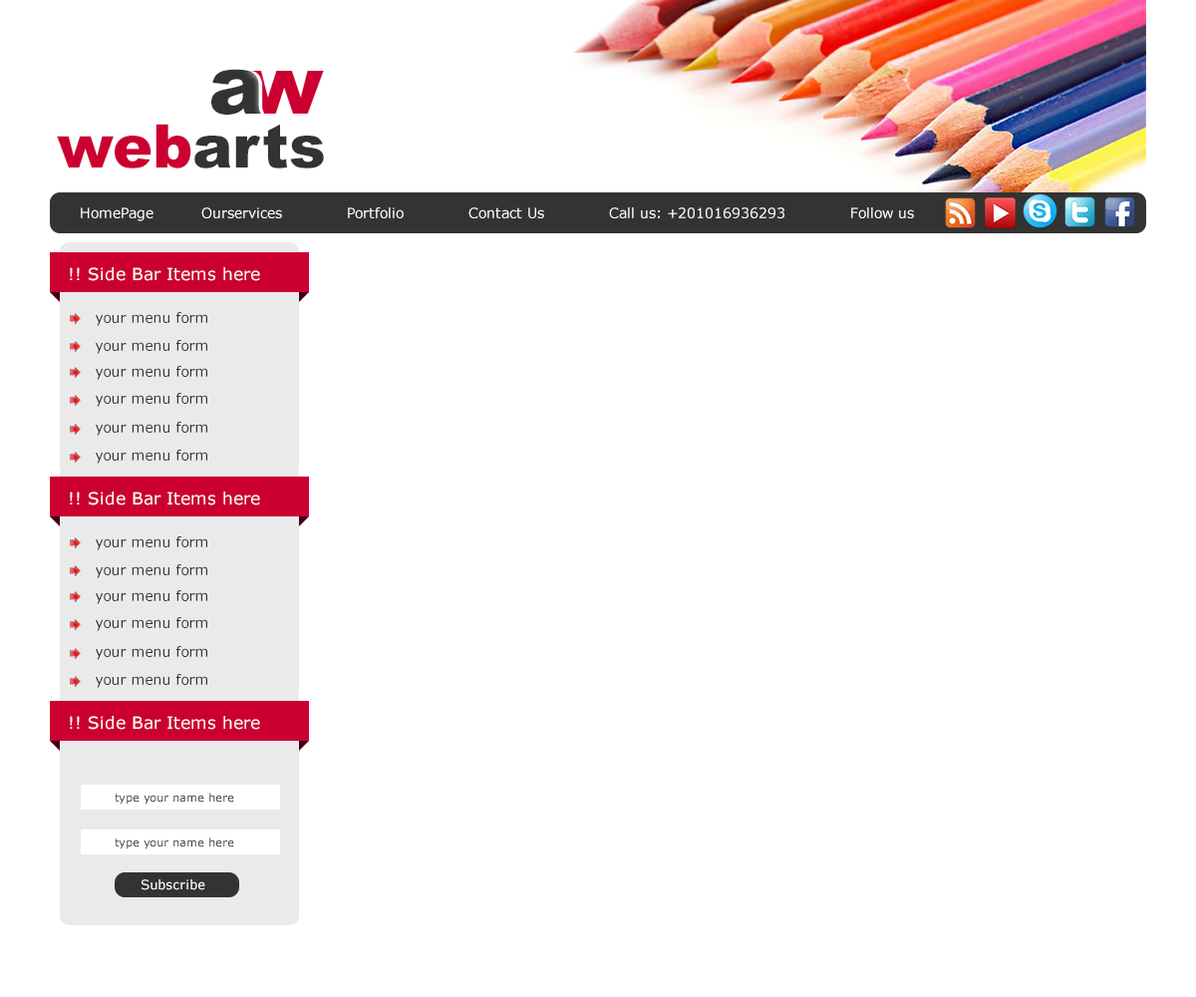
<style>
.page{position:relative;width:1196px;height:997px;background:#ffffff}
.page>*{position:absolute;margin:0}
.t1{font:14px "Verdana";color:#ffffff}
.t2{font:16.9px "Verdana";color:#ffffff}
.t3{font:14px "Verdana";color:#333333}
.t4{font:11px "Verdana";color:#333333}
.t5{font:13px "Verdana";color:#ffffff}
</style>
<div class="page">
<p class="t1" style="left:81px;top:207px;width:833px;height:14px">HomePage            Ourservices             Portfolio             Contact Us             Call us: +201016936293             Follow us</p>
<p class="t2" style="left:70px;top:267px;width:190px;height:14px">Side Bar Items here !!</p>
<p class="t3" style="left:96px;top:312px;width:111px;height:14px">your menu form</p>
<p class="t3" style="left:96px;top:340px;width:111px;height:14px">your menu form</p>
<p class="t3" style="left:96px;top:366px;width:111px;height:14px">your menu form</p>
<p class="t3" style="left:96px;top:393px;width:111px;height:14px">your menu form</p>
<p class="t3" style="left:96px;top:422px;width:111px;height:14px">your menu form</p>
<p class="t3" style="left:96px;top:450px;width:111px;height:14px">your menu form</p>
<p class="t2" style="left:70px;top:491px;width:190px;height:14px">Side Bar Items here !!</p>
<p class="t3" style="left:96px;top:536px;width:111px;height:14px">your menu form</p>
<p class="t3" style="left:96px;top:564px;width:111px;height:14px">your menu form</p>
<p class="t3" style="left:96px;top:590px;width:111px;height:14px">your menu form</p>
<p class="t3" style="left:96px;top:617px;width:111px;height:14px">your menu form</p>
<p class="t3" style="left:96px;top:646px;width:111px;height:14px">your menu form</p>
<p class="t3" style="left:96px;top:674px;width:111px;height:14px">your menu form</p>
<p class="t2" style="left:70px;top:716px;width:190px;height:14px">Side Bar Items here !!</p>
<p class="t4" style="left:115px;top:792px;width:119px;height:12px">type your name here</p>
<p class="t4" style="left:115px;top:837px;width:119px;height:12px">type your name here</p>
<p class="t5" style="left:142px;top:879px;width:63px;height:11px">Subscribe</p>
</div>
